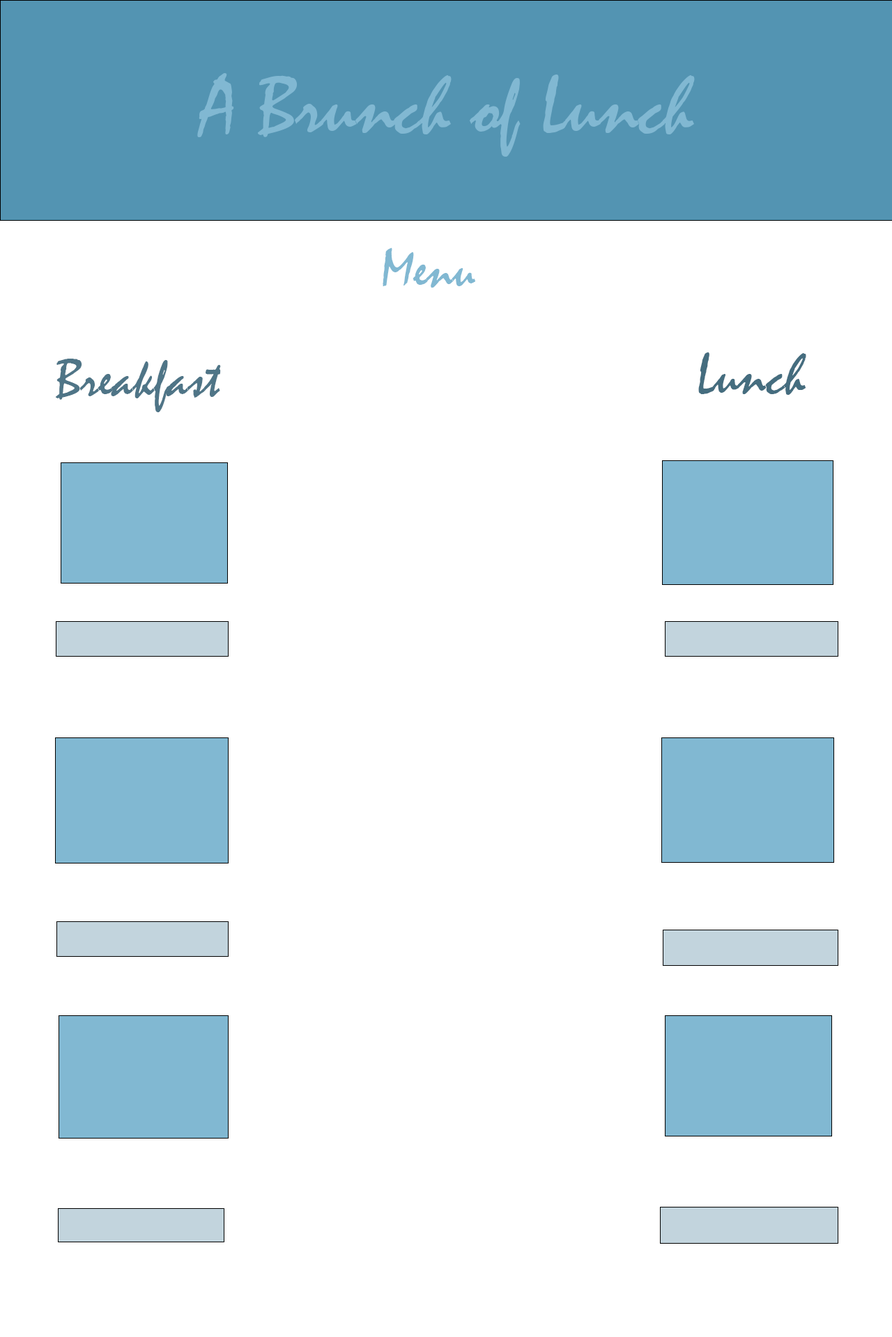
<style>
.page{position:relative;width:892px;height:1337px;background:#ffffff}
.page>*{position:absolute;margin:0}
.t1{font:82.7px "Mistral";color:#81b8d2}
.t2{font:55.1px "Mistral";color:#81b8d2}
.t3{font:58.8px "Mistral";color:#456d7f}
.t4{font:55.1px "Mistral";color:#4f7587}
</style>
<div class="page">
<p class="t1" style="left:197px;top:73px;width:497px;height:84px">A Brunch of Lunch</p>
<p class="t2" style="left:382px;top:248px;width:94px;height:40px">Menu</p>
<p class="t3" style="left:698px;top:352px;width:108px;height:43px">Lunch</p>
<p class="t4" style="left:56px;top:359px;width:165px;height:53px">Breakfast</p>
</div>
